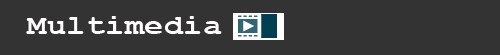
<style>
.page{position:relative;width:500px;height:55px;background:#333333}
.page>*{position:absolute;margin:0}
.t1{font:28.4px "CourierNewPS-BoldMT";color:#fefcfc;scale:1.14 1}
</style>
<div class="page">
<p class="t1" style="left:26px;top:16px;width:196px;height:18px">Multimedia</p>
</div>
